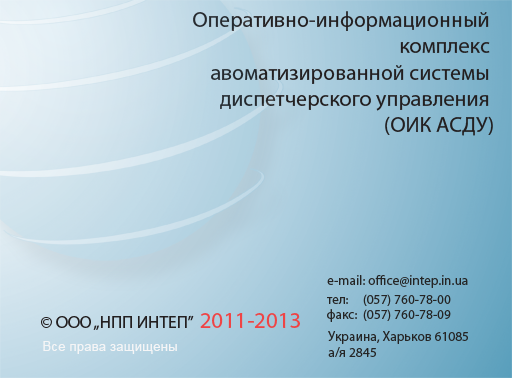
<style>
.page{position:relative;width:512px;height:378px}
.page>*{position:absolute;margin:0}
.t1{font:21.9px "MyriadPro-Regular";color:#231f20}
.t2{font:13.5px "MyriadPro-Regular";color:#252525}
.t3{font:17.3px "MyriadPro-Regular";color:#231f20}
.t4{font:23.1px "MyriadPro-Regular";color:#ef4445}
.t5{font:13.5px "ArialMT";color:#f5f5f6}
</style>
<div class="page">
<p class="t1" style="left:193px;top:11px;width:300px;height:125px;text-align:right">Оперативно-информационный <br>комплекс <br>авоматизированной системы <br>диспетчерского управления <br>(ОИК АСДУ)</p>
<p class="t2" style="left:327px;top:275px;width:141px;height:13px">e-mail: office@intep.in.ua</p>
<p class="t2" style="left:327px;top:294px;width:124px;height:12px">тел:     (057) 760-78-00</p>
<p class="t3" style="left:41px;top:315px;width:153px;height:15px">© ООО „НПП ИНТЕП”</p>
<p class="t4" style="left:200px;top:313px;width:100px;height:15px">2011-2013select * from</p>
<p class="t2" style="left:327px;top:309px;width:124px;height:13px">факс:  (057) 760-78-09</p>
<p class="t5" style="left:43px;top:341px;width:134px;height:13px">Все права защищены</p>
<p class="t2" style="left:328px;top:331px;width:140px;height:26px">Украина, Харьков 61085 <br>а/я 2845</p>
</div>
